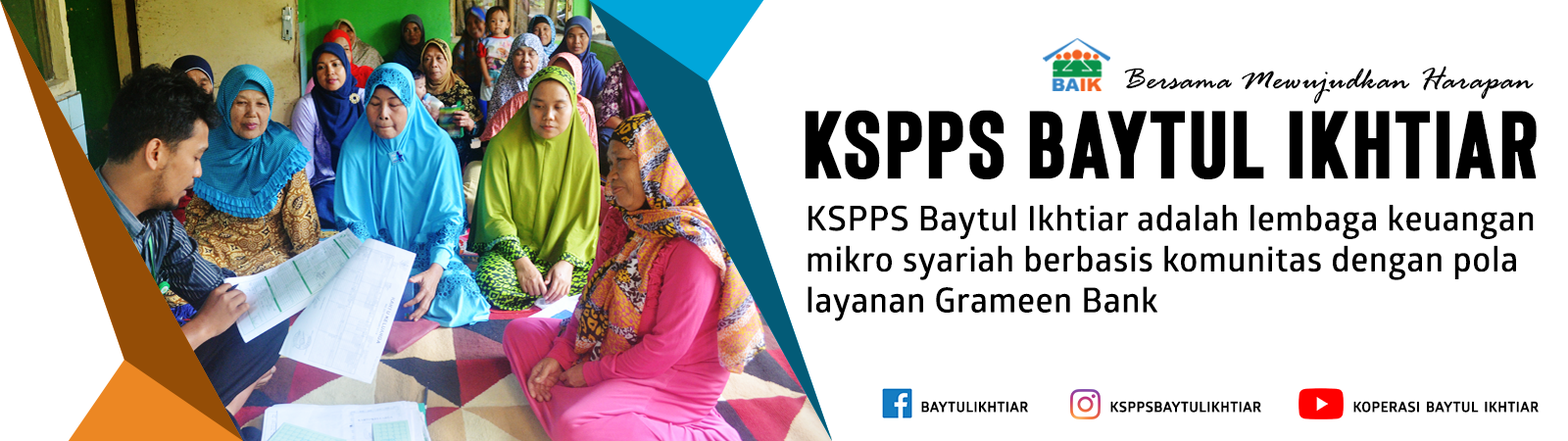
<style>
.page{position:relative;width:1568px;height:441px;background:#ffffff}
.page>*{position:absolute;margin:0}
.t1{font:33.6px "RageItalic";letter-spacing:0.02em;color:#000000}
.t2{font:94.8px "Bison-Bold";letter-spacing:0.02em;color:#000000;font-weight:bold}
.t3{font:34.1px "GloberSemiBoldFree";letter-spacing:0.02em;color:#000000}
.t4{font:19.6px "GloberSemiBoldFree";letter-spacing:0.02em;color:#000000;font-variant:small-caps;font-weight:bold}
</style>
<div class="page">
<p class="t1" style="left:1124px;top:66px;width:410px;height:38px">Bersama Mewujudkan Harapan</p>
<p class="t2" style="left:805px;top:110px;width:732px;height:69px">KSPPS BAYTUL IKHTIAR</p>
<p class="t3" style="left:808px;top:205px;width:726px;height:116px">KSPPS Baytul Ikhtiar adalah lembaga keuangan mikro syariah berbasis komunitas dengan pola layanan Grameen Bank</p>
<p class="t4" style="left:921px;top:401px;width:107px;height:12px">baytulikhtiar</p>
<p class="t4" style="left:1110px;top:401px;width:151px;height:12px">ksppsbaytulikhtiar</p>
<p class="t4" style="left:1353px;top:401px;width:186px;height:12px">koperasi baytul ikhtiar</p>
</div>
